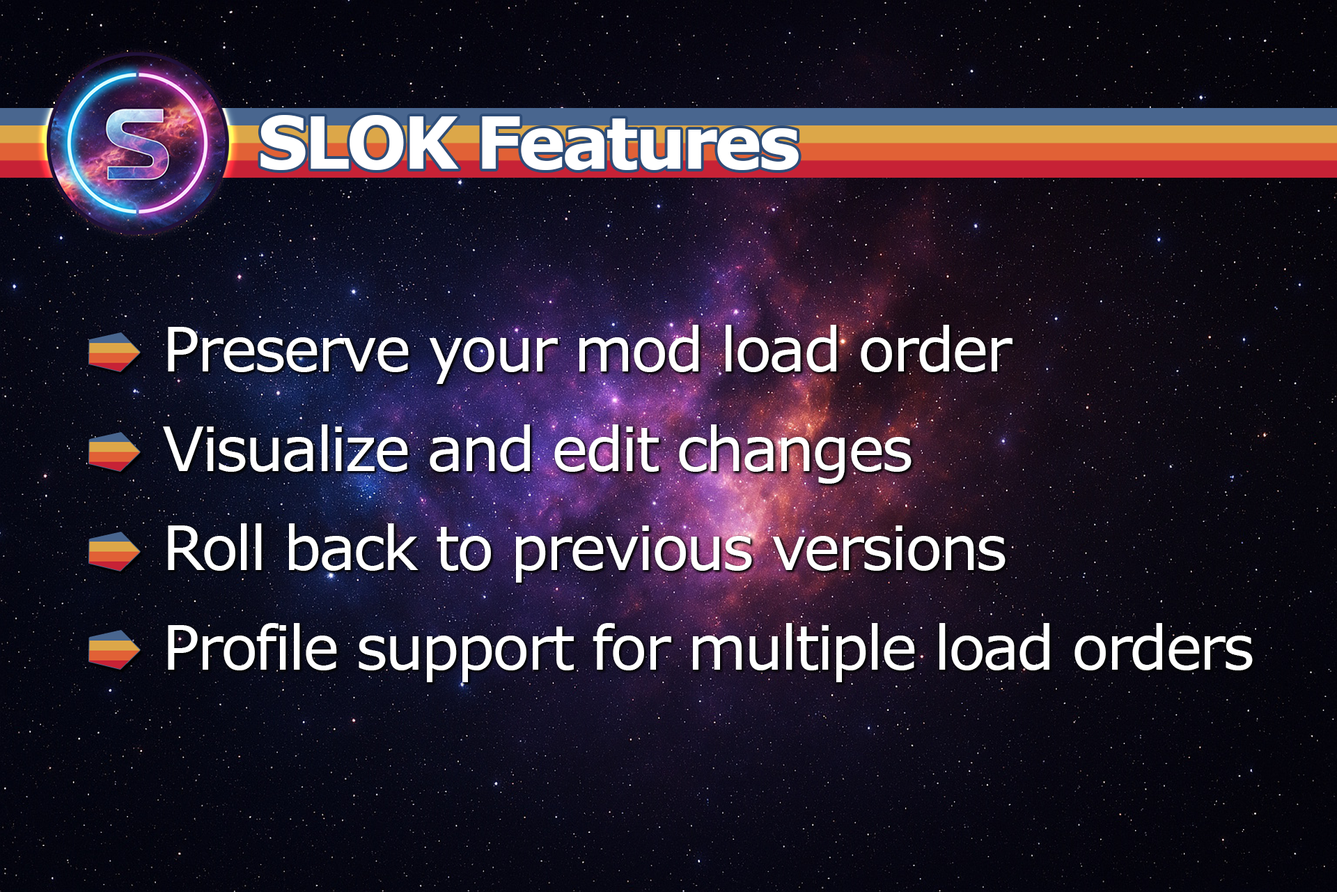
<style>
.page{position:relative;width:1337px;height:892px}
.page>*{position:absolute;margin:0}
.t1{font:71.4px "Verdana-Bold";letter-spacing:-0.05em;color:#ffffff}
.t2{font:61.1px/99.3px "Verdana";letter-spacing:-0.04em;color:#ffffff}
</style>
<div class="page">
<p class="t1" style="left:261px;top:115px;width:538px;height:55px">SLOK Features</p>
<p class="t2" style="left:163px;top:325px;width:1090px;height:357px">Preserve your mod load order<br>Visualize and edit changes<br>Roll back to previous versions<br>Profile support for multiple load orders</p>
</div>
